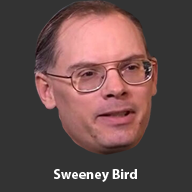
<style>
.page{position:relative;width:192px;height:192px;background:#333333}
.page>*{position:absolute;margin:0}
.t1{font:14px "MyriadPro-Bold";color:#ffffff}
.t2{font:10px "Reduction";color:#ffffff}
</style>
<div class="page">
<p class="t1" style="left:54px;top:169px;width:83px;height:13px"><span class="t2"><br></span>Sweeney Bird</p>
</div>
